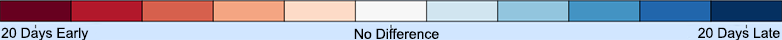
<style>
.page{position:relative;width:782px;height:40px;background:#d1e6ff}
.page>*{position:absolute;margin:0}
.t1{font:14px "ArialMT";color:#000000}
</style>
<div class="page">
<p class="t1" style="left:1px;top:27px;width:88px;height:14px">20 Days Early</p>
<p class="t1" style="left:354px;top:28px;width:85px;height:11px">No Difference</p>
<p class="t1" style="left:698px;top:27px;width:82px;height:14px">20 Days Late</p>
</div>
